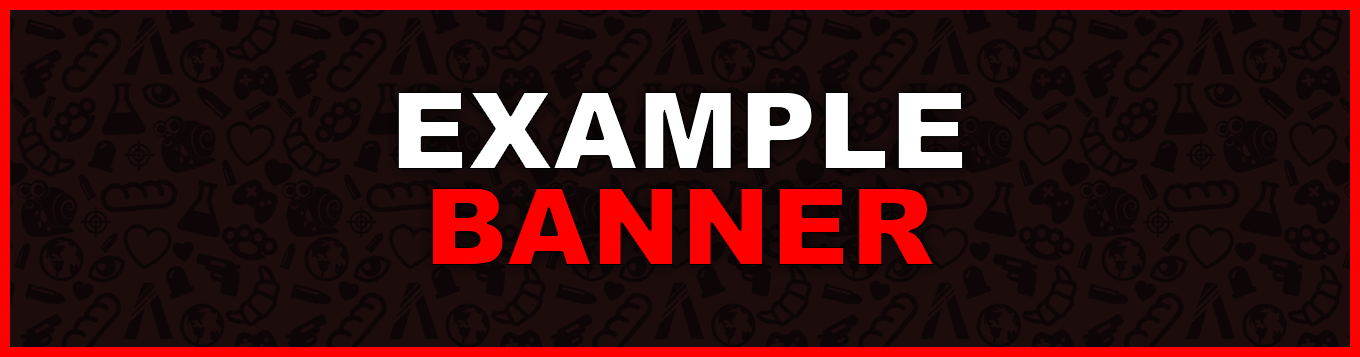
<style>
.page{position:relative;width:1360px;height:357px;background:#1d0c0c}
.page>*{position:absolute;margin:0}
.t1{font:108.3px/95.8px "Arial-Black";color:#ffffff}
.t2{font:108.3px/95.8px "Arial-Black";color:#ff0000}
</style>
<div class="page">
<p class="t1" style="left:397px;top:92px;width:567px;height:173px;text-align:center">EXAMPLE<br><span class="t2">BANNER</span></p>
</div>
